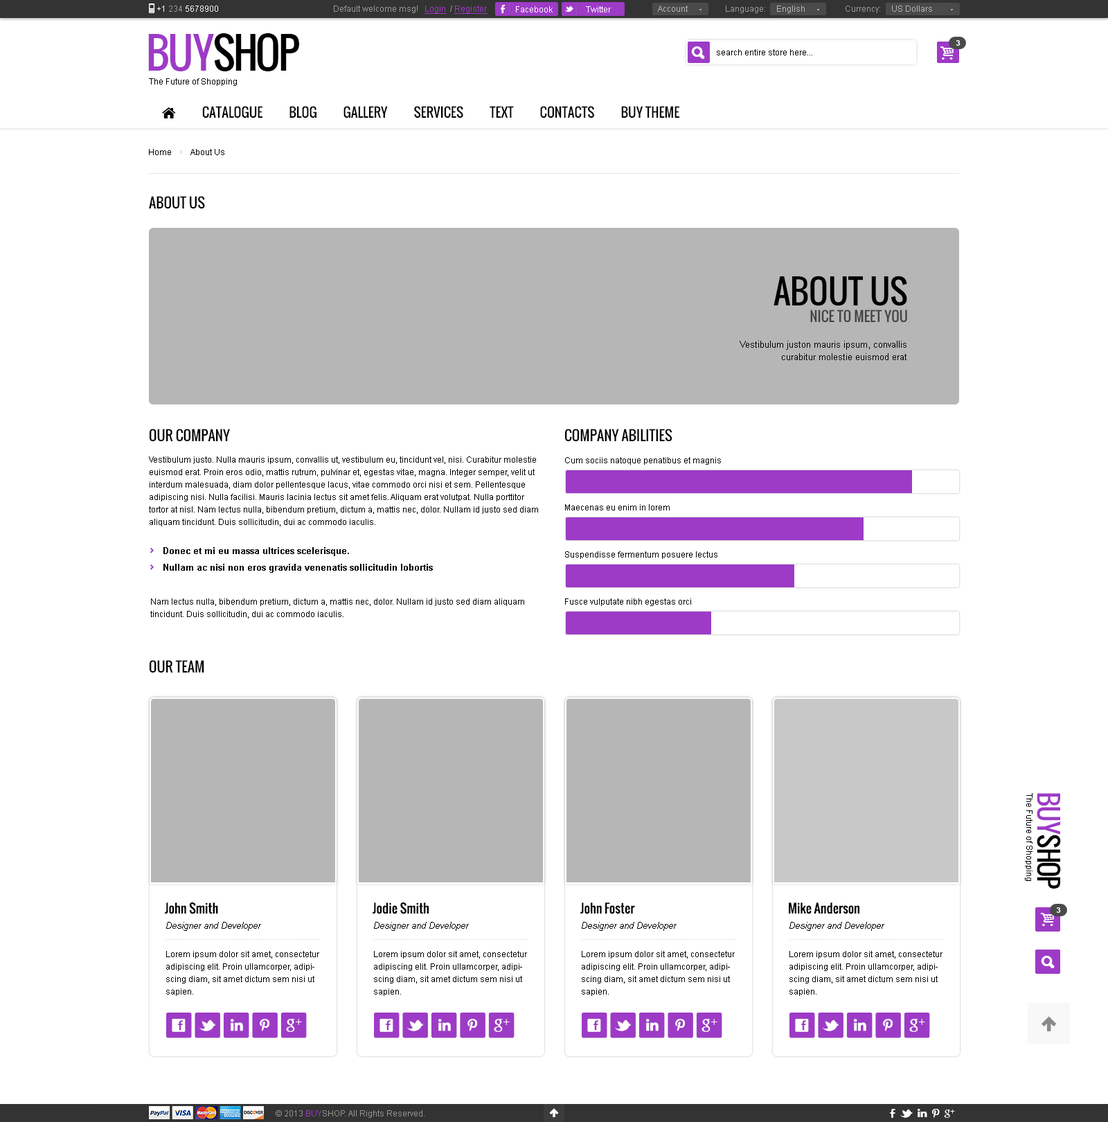
<style>
.page{position:relative;width:1108px;height:1122px;background:#ffffff}
.page>*{position:absolute;margin:0}
.t1{font:8.3px "ArialMT";color:#ffffff}
.t2{font:8.3px "ArialMT";color:#9b9b9b}
.t3{font:8.3px "ArialMT";color:#9d3bc6;text-decoration:underline}
.t4{font:8.3px "ArialMT";color:#b6b6b6}
.t5{font:41.5px "Oswald";letter-spacing:-0.06em;color:#000000;text-transform:uppercase}
.t6{font:41.5px "Oswald";letter-spacing:-0.06em;color:#9d3bc6;text-transform:uppercase}
.t7{font:7.6px "Arial-BoldMT";color:#ffffff;text-transform:uppercase}
.t8{font:8.3px "ArialMT";color:#000000}
.t9{font:13.8px "Oswald";color:#000000;text-transform:uppercase}
.t10{font:13.8px "Oswald";color:#434343;text-transform:uppercase}
.t11{font:33.2px "Oswald";color:#000000;text-transform:uppercase}
.t12{font:9px/12.5px "ArialMT";color:#000000}
.t13{font:8.3px/12.5px "ArialMT";color:#000000}
.t14{font:8.3px/47.1px "ArialMT";color:#000000}
.t15{font:9px/16.6px "Arial-BoldMT";color:#000000}
.t16{font:26.3px "Oswald";letter-spacing:-0.06em;color:#000000;text-transform:uppercase}
.t17{font:26.3px "Oswald";letter-spacing:-0.06em;color:#9d3bc6;text-transform:uppercase}
.t18{font:12.5px "Oswald";color:#000000}
.t19{font:9px "Arial-ItalicMT";color:#010101}
.t20{font:9px "Arial-BoldMT";color:#e6e6e6}
.t21{font:12.7px "andepict";letter-spacing:0.94em;color:#ffffff}
.t22{font:8.3px "ArialMT";color:#959595}
.t23{font:8.3px "ArialMT";color:#9d3bc6}
</style>
<div class="page">
<p class="t1" style="left:157px;top:6px;width:61px;height:6px">+1 <span class="t2">234 </span>5678900</p>
<p class="t2" style="left:334px;top:6px;width:153px;height:8px">Default welcome msg!   <span class="t3">Login </span> / <span class="t3">Register</span></p>
<p class="t2" style="left:334px;top:6px;width:153px;height:8px">Default welcome msg!   <span class="t3">Login </span> / <span class="t3">Register</span></p>
<p class="t4" style="left:658px;top:6px;width:29px;height:6px">Account</p>
<p class="t2" style="left:726px;top:6px;width:78px;height:7px">Language:     <span class="t4">English</span></p>
<p class="t4" style="left:845px;top:6px;width:87px;height:7px"><span class="t2">Currency:     </span>US Dollars</p>
<p class="t1" style="left:516px;top:6px;width:36px;height:6px">Facebook</p>
<p class="t1" style="left:586px;top:6px;width:25px;height:6px">Twitter</p>
<p class="t5" style="left:148px;top:33px;width:151px;height:38px"><span class="t6">buy</span>shop</p>
<p class="t7" style="left:955px;top:40px;width:5px;height:6px">3</p>
<p class="t8" style="left:717px;top:49px;width:95px;height:6px">search entire store here...</p>
<p class="t8" style="left:149px;top:78px;width:88px;height:8px">The Future of Shopping</p>
<p class="t8" style="left:149px;top:149px;width:75px;height:6px">Home         About Us</p>
<p class="t9" style="left:149px;top:196px;width:56px;height:13px">ABOUT US</p>
<p class="t10" style="left:773px;top:276px;width:134px;height:47px;text-align:right"><span class="t11">About us<br></span>nice to meet you</p>
<p class="t12" style="left:739px;top:341px;width:167px;height:19px;text-align:right">Vestibulum juston mauris ipsum, convallis<br>curabitur molestie euismod erat</p>
<p class="t9" style="left:150px;top:429px;width:80px;height:13px">OUR COMPANY</p>
<p class="t9" style="left:565px;top:429px;width:107px;height:13px">COMPANY ABILITIES</p>
<p class="t13" style="left:149px;top:456px;width:389px;height:70px">Vestibulum justo. Nulla mauris ipsum, convallis ut, vestibulum eu, tincidunt vel, nisi. Curabitur molestie euismod erat. Proin eros odio, mattis rutrum, pulvinar et, egestas vitae, magna. Integer semper, velit ut interdum malesuada, diam dolor pellentesque lacus, vitae commodo orci nisi et sem. Pellentesque adipiscing nisi. Nulla facilisi. Mauris lacinia lectus sit amet felis. Aliquam erat volutpat. Nulla porttitor tortor at nisl. Nam lectus nulla, bibendum pretium, dictum a, mattis nec, dolor. Nullam id justo sed diam aliquam tincidunt. Duis sollicitudin, dui ac commodo iaculis.</p>
<p class="t14" style="left:565px;top:457px;width:156px;height:149px">Cum sociis natoque penatibus et magnis <br>Maecenas eu enim in lorem<br>Suspendisse fermentum posuere lectus<br>Fusce vulputate nibh egestas orci</p>
<p class="t15" style="left:163px;top:547px;width:270px;height:26px">Donec et mi eu massa ultrices scelerisque. <br>Nullam ac nisi non eros gravida venenatis sollicitudin lobortis</p>
<p class="t13" style="left:150px;top:598px;width:374px;height:20px">Nam lectus nulla, bibendum pretium, dictum a, mattis nec, dolor. Nullam id justo sed diam aliquam tincidunt. Duis sollicitudin, dui ac commodo iaculis.</p>
<p class="t9" style="left:150px;top:660px;width:54px;height:13px">OUR TEAM</p>
<p class="t8" style="left:1025px;top:793px;width:7px;height:88px;rotate:90deg">The Future of Shopping</p>
<p class="t16" style="left:1036px;top:793px;width:25px;height:95px;rotate:90deg"><span class="t17">buy</span>shop</p>
<p class="t18" style="left:165px;top:902px;width:53px;height:12px">John Smith</p>
<p class="t18" style="left:372px;top:902px;width:57px;height:12px">Jodie Smith</p>
<p class="t18" style="left:580px;top:902px;width:55px;height:12px">John Foster</p>
<p class="t18" style="left:789px;top:902px;width:70px;height:12px">Mike Anderson</p>
<p class="t7" style="left:1056px;top:907px;width:5px;height:5px">3</p>
<p class="t19" style="left:166px;top:921px;width:95px;height:9px">Designer and Developer</p>
<p class="t19" style="left:374px;top:921px;width:95px;height:9px">Designer and Developer</p>
<p class="t19" style="left:582px;top:921px;width:94px;height:9px">Designer and Developer</p>
<p class="t19" style="left:789px;top:921px;width:95px;height:9px">Designer and Developer</p>
<p class="t20" style="left:165px;top:939px;width:155px;height:0px">--------------------------------------------------------</p>
<p class="t20" style="left:373px;top:939px;width:155px;height:0px">--------------------------------------------------------</p>
<p class="t20" style="left:581px;top:939px;width:154px;height:0px">--------------------------------------------------------</p>
<p class="t20" style="left:789px;top:939px;width:154px;height:0px">--------------------------------------------------------</p>
<p class="t13" style="left:166px;top:951px;width:153px;height:45px">Lorem ipsum dolor sit amet, consectetur adipiscing elit. Proin ullamcorper, adipiscing diam, sit amet dictum sem nisi ut sapien.</p>
<p class="t13" style="left:374px;top:951px;width:153px;height:45px">Lorem ipsum dolor sit amet, consectetur adipiscing elit. Proin ullamcorper, adipiscing diam, sit amet dictum sem nisi ut sapien.</p>
<p class="t13" style="left:582px;top:951px;width:153px;height:45px">Lorem ipsum dolor sit amet, consectetur adipiscing elit. Proin ullamcorper, adipiscing diam, sit amet dictum sem nisi ut sapien.</p>
<p class="t13" style="left:789px;top:951px;width:153px;height:45px">Lorem ipsum dolor sit amet, consectetur adipiscing elit. Proin ullamcorper, adipiscing diam, sit amet dictum sem nisi ut sapien.</p>
<p class="t21" style="left:286px;top:1018px;width:16px;height:14px">+</p>
<p class="t21" style="left:494px;top:1018px;width:16px;height:14px">+</p>
<p class="t21" style="left:701px;top:1018px;width:16px;height:14px">+</p>
<p class="t21" style="left:909px;top:1018px;width:16px;height:14px">+</p>
<p class="t22" style="left:276px;top:1110px;width:148px;height:7px">© 2013 <span class="t23">BUY</span>SHOP. All Rights Reserved.</p>
</div>
